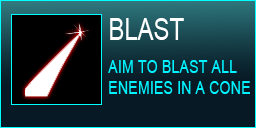
<style>
.page{position:relative;width:256px;height:128px;background:#061924}
.page>*{position:absolute;margin:0}
.t1{font:30px "ArialMT";color:#ffffff;scale:0.8 1}
.t2{font:18px "ArialMT";color:#00f3ff;scale:0.8 1}
</style>
<div class="page">
<p class="t1" style="left:110px;top:18px;width:74px;height:22px">BLAST</p>
<p class="t2" style="left:108px;top:60px;width:142px;height:34px">AIM TO BLAST ALL<br>ENEMIES IN A CONE</p>
</div>
